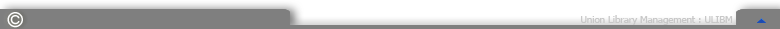
<style>
.page{position:relative;width:780px;height:29px;background:#7f7f7f}
.page>*{position:absolute;margin:0}
.t1{font:21.3px "FrutigerLinotype-Roman";color:#ffffff}
.t2{font:9.6px "Tahoma";color:#c8c8c8}
</style>
<div class="page">
<p class="t1" style="left:7px;top:12px;width:16px;height:16px">©</p>
<p class="t2" style="left:581px;top:15px;width:152px;height:10px">Union Library Management : ULIBM</p>
</div>
